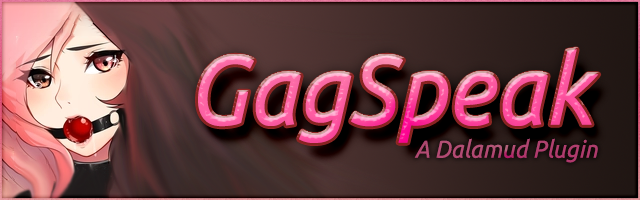
<style>
.page{position:relative;width:640px;height:200px}
.page>*{position:absolute;margin:0}
.t1{font:97px "Ubuntu-Italic";scale:0.95 1}
.t2{font:24.2px "Ubuntu-Italic";color:#b14570;scale:0.95 1}
</style>
<div class="page">
<p class="t1" style="left:198px;top:49px;width:401px;height:94px">GagSpeak</p>
<p class="t2" style="left:414px;top:138px;width:184px;height:25px">A Dalamud Plugin</p>
</div>
